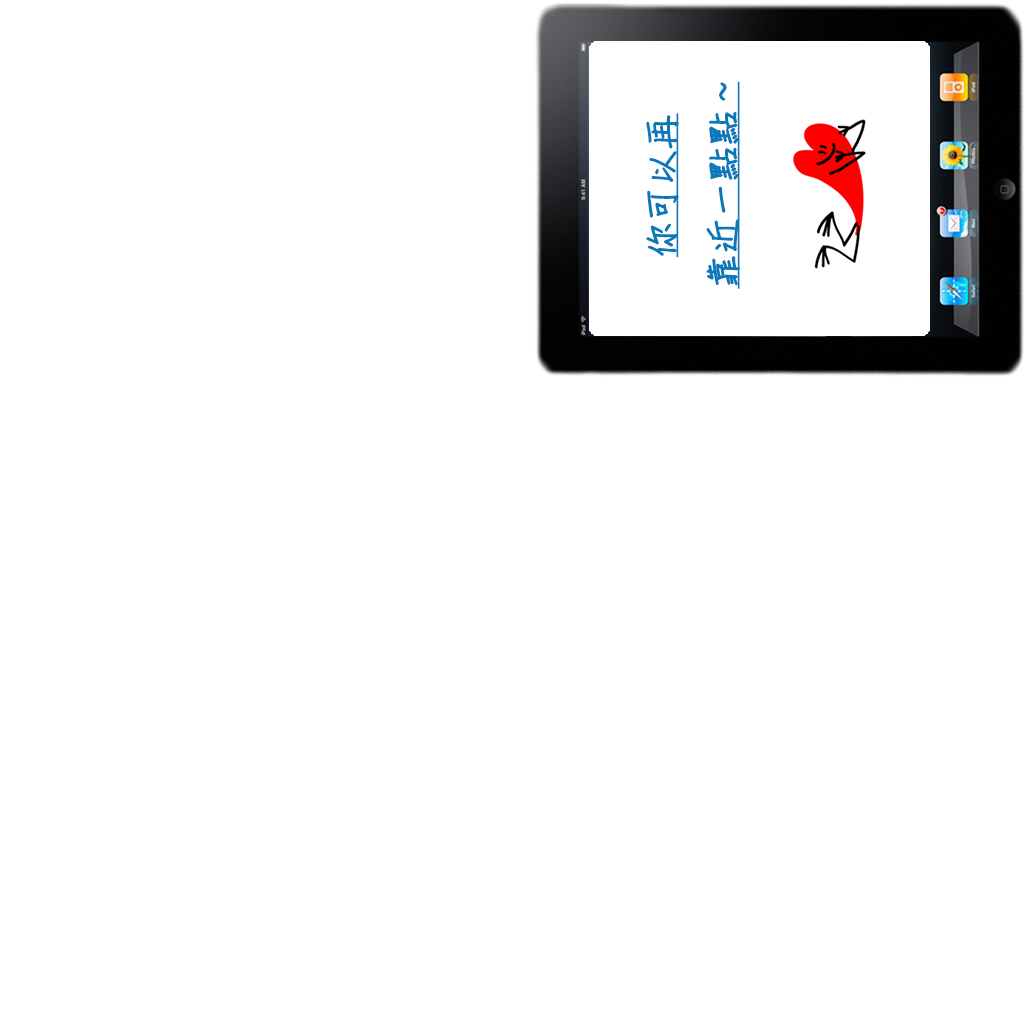
<style>
.page{position:relative;width:1024px;height:1024px;background:#ffffff}
.page>*{position:absolute;margin:0}
.t1{font:35px "DFChu-W4-WIN-BF";color:#0979ba;font-weight:bold;text-decoration:underline}
</style>
<div class="page">
<p class="t1" style="left:646px;top:81px;width:94px;height:208px;text-align:center;rotate:-90deg">你可以再<br>靠近一點點~</p>
</div>
